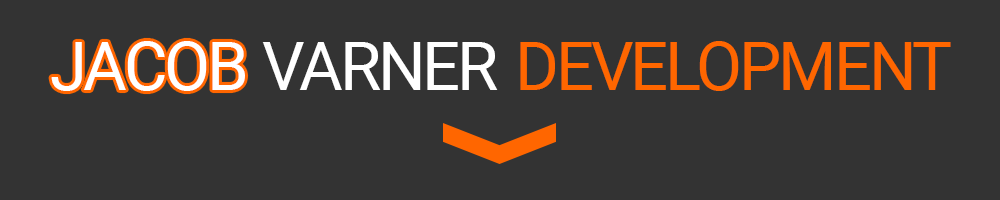
<style>
.page{position:relative;width:1000px;height:200px;background:#333333}
.page>*{position:absolute;margin:0}
.t1{font:67.9px "Roboto-Regular";letter-spacing:-0.05em;color:#ffffff}
.t2{font:67.9px "Roboto-Regular";letter-spacing:-0.05em;color:#ff6600}
</style>
<div class="page">
<p class="t1" style="left:51px;top:41px;width:194px;height:50px">JACOB</p>
<p class="t2" style="left:520px;top:41px;width:431px;height:50px">DEVELOPMENT</p>
<p class="t1" style="left:262px;top:42px;width:236px;height:48px">VARNER</p>
</div>
